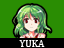
<style>
.page{position:relative;width:64px;height:48px;background:#2a8d03}
.page>*{position:absolute;margin:0}
.t1{font:10px "Cambria";color:#ffffff}
</style>
<div class="page">
<p class="t1" style="left:19px;top:40px;width:26px;height:7px">YUKA</p>
</div>
